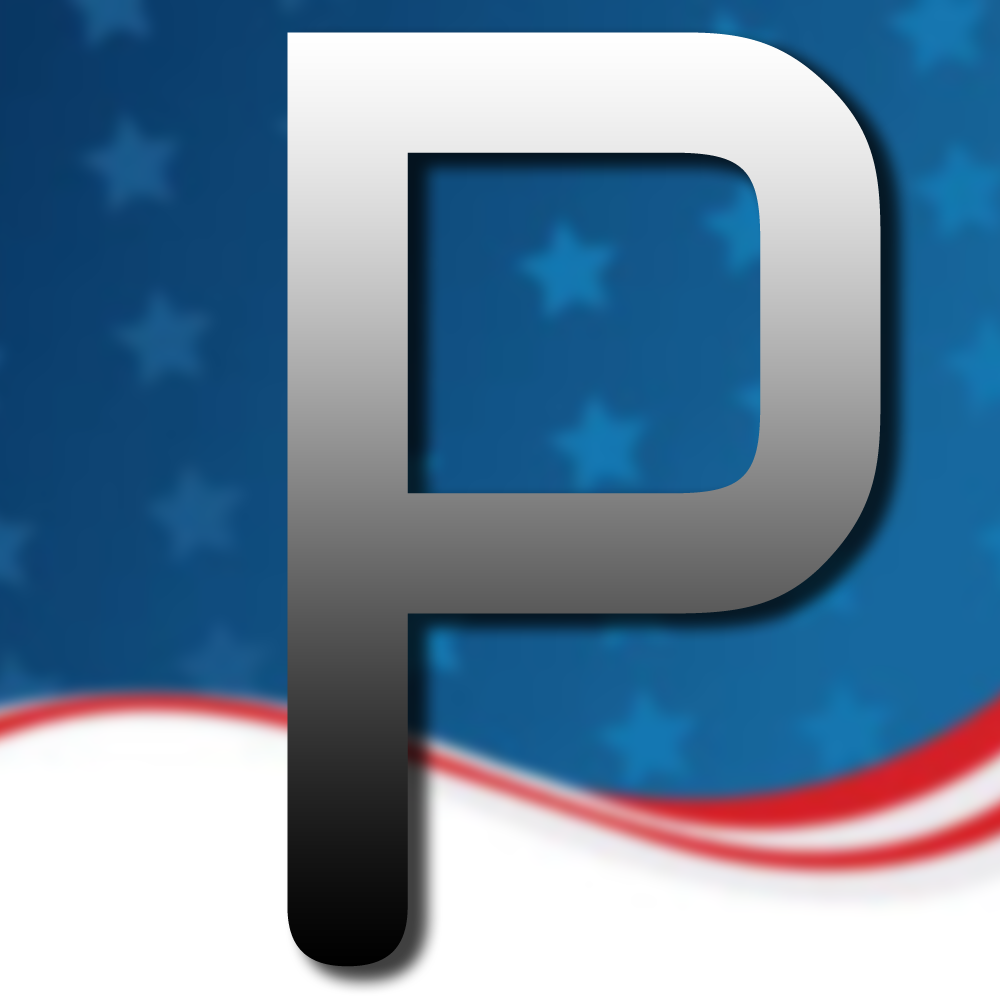
<style>
.page{position:relative;width:1000px;height:1000px}
.page>*{position:absolute;margin:0}
.t1{font:1199.9px "OCRAStd"}
</style>
<div class="page">
<p class="t1" style="left:287px;top:32px;width:594px;height:935px">P</p>
</div>
